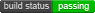
<style>
.page{position:relative;width:95px;height:13px}
.page>*{position:absolute;margin:0}
.t1{font:10px "ArialMT";color:#cccccc;scale:0.9 1}
.t2{font:10px "ArialMT";color:#ffffff;scale:0.9 1}
</style>
<div class="page">
<p class="t1" style="left:4px;top:2px;width:46px;height:7px">build status</p>
<p class="t2" style="left:58px;top:2px;width:31px;height:9px">passing</p>
</div>
